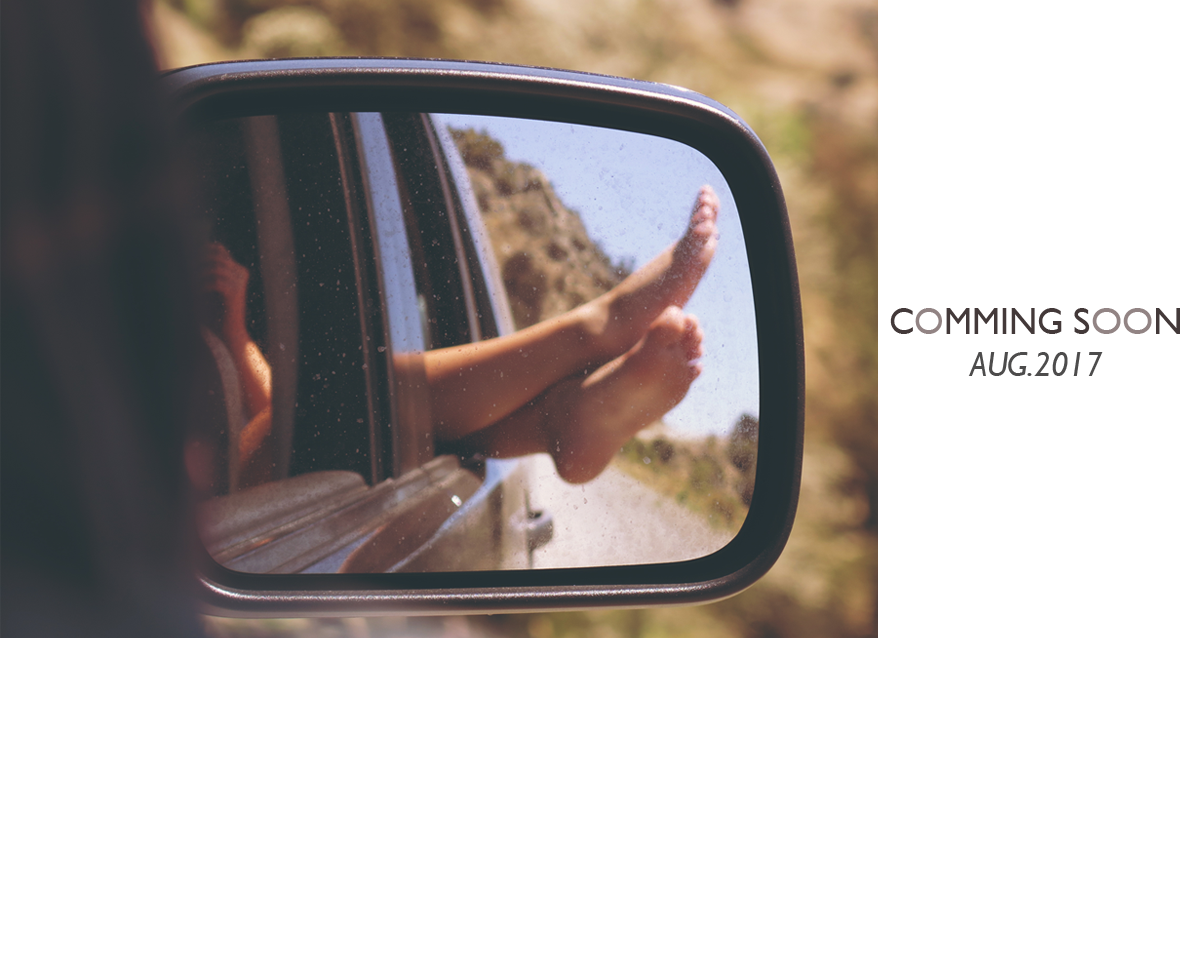
<style>
.page{position:relative;width:1200px;height:980px;background:#ffffff}
.page>*{position:absolute;margin:0}
.t1{font:34.4px/41.9px "GillSansMT-Italic";color:#4d4c4c;scale:0.95 1}
.t2{font:37.8px/41.9px "GillSansMT";color:#433939;scale:0.95 1}
.t3{font:37.8px/41.9px "GillSansMT";color:#928484;scale:0.95 1}
.t4{font:37.8px/40.5px "GillSansMT";color:#433939}
.t5{font:37.8px/40.5px "GillSansMT";color:#928484}
</style>
<div class="page">
<p class="t1" style="left:890px;top:308px;width:290px;height:68px;text-align:center"><span class="t2">C</span><span class="t3">O</span><span class="t2">MMING </span><span class="t4">S</span><span class="t5">OO</span><span class="t4">N<br></span>AUG.2017</p>
</div>
